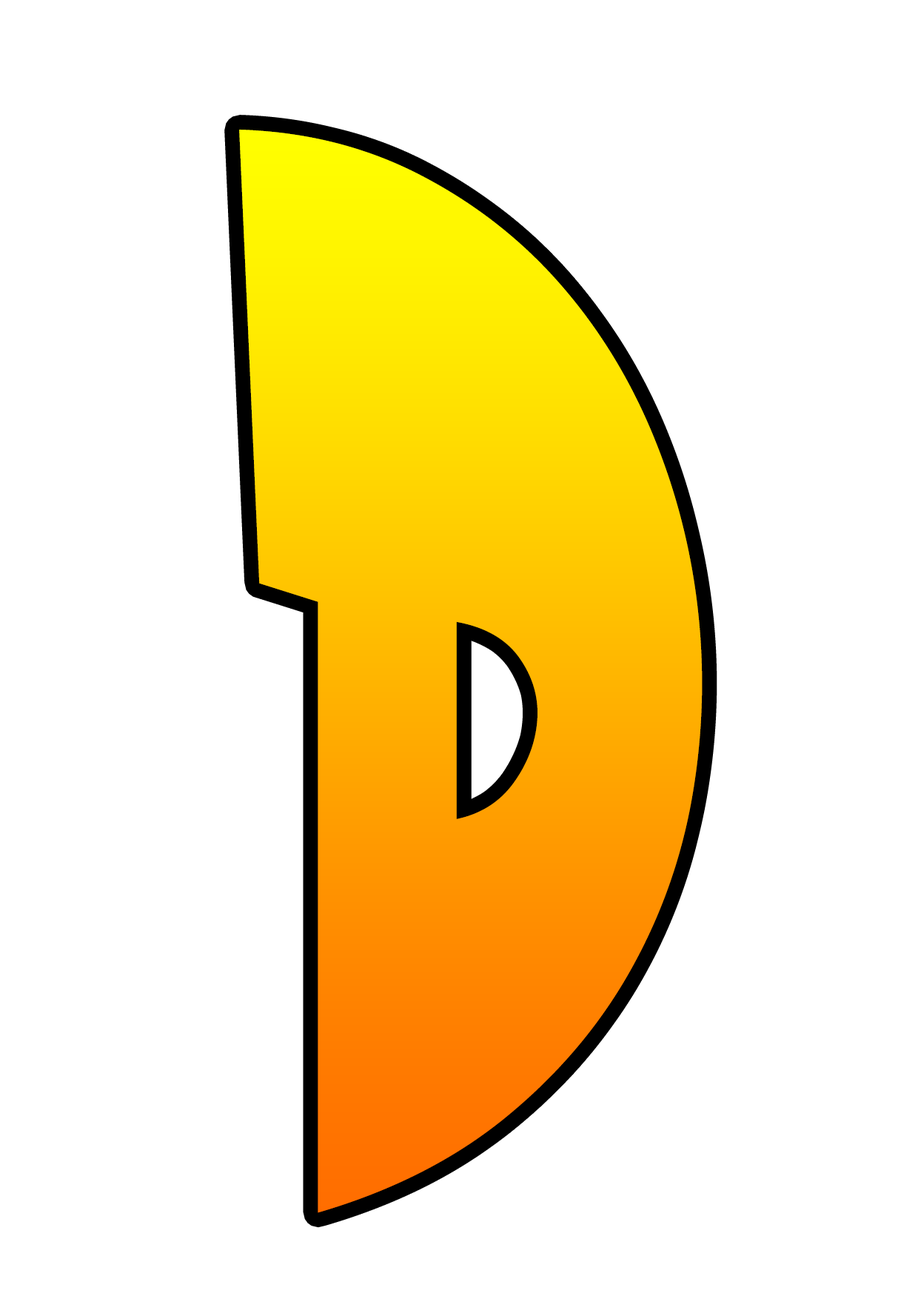
<style>
.page{position:relative;width:918px;height:1299px;background:#ffffff}
.page>*{position:absolute;margin:0}
.t1{font:1542.6px "SaiyanSans"}
</style>
<div class="page">
<p class="t1" style="left:239px;top:130px;width:464px;height:1083px">D</p>
</div>
